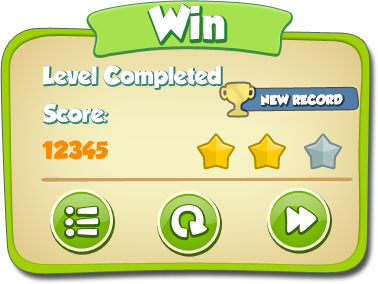
<style>
.page{position:relative;width:378px;height:284px}
.page>*{position:absolute;margin:0}
.t1{font:40px "GROBOLD";color:#ffffff}
.t2{font:22px "GROBOLD";color:#ffffff}
.t3{font:12px "GROBOLD";color:#ffffff;text-transform:uppercase}
.t4{font:20px "GROBOLD";color:#ffffff}
.t5{font:22px "GROBOLD";color:#ff8a00}
</style>
<div class="page">
<p class="t1" style="left:148px;top:3px;width:77px;height:39px">Win</p>
<p class="t2" style="left:43px;top:65px;width:178px;height:23px">Level Completed</p>
<p class="t3" style="left:261px;top:93px;width:82px;height:13px">New Record</p>
<p class="t2" style="left:43px;top:103px;width:64px;height:20px">Score<span class="t4">:</span></p>
<p class="t5" style="left:42px;top:140px;width:66px;height:20px">12345</p>
</div>
